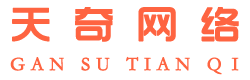
<style>
.page{position:relative;width:250px;height:80px;background:#ffffff}
.page>*{position:absolute;margin:0}
.t1{font:40px "TRENDS";letter-spacing:0.55em;color:#fe6441;font-weight:bold}
.t2{font:19px "STSong";letter-spacing:0.288em;color:#fe6441;font-weight:bold}
</style>
<div class="page">
<p class="t1" style="left:12px;top:7px;width:227px;height:35px">天奇网络</p>
<p class="t2" style="left:10px;top:56px;width:229px;height:19px">GAN SU TIAN Q I</p>
</div>
